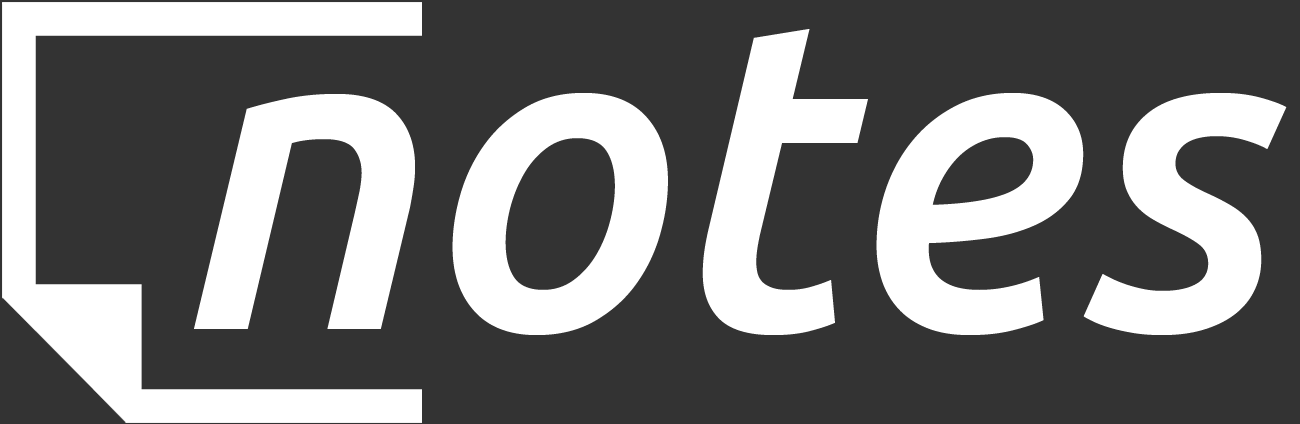
<style>
.page{position:relative;width:1300px;height:424px;background:#333333}
.page>*{position:absolute;margin:0}
.t1{font:440px "Ubuntu-MediumItalic";color:#ffffff}
</style>
<div class="page">
<p class="t1" style="left:194px;top:29px;width:1093px;height:306px">notes</p>
</div>
